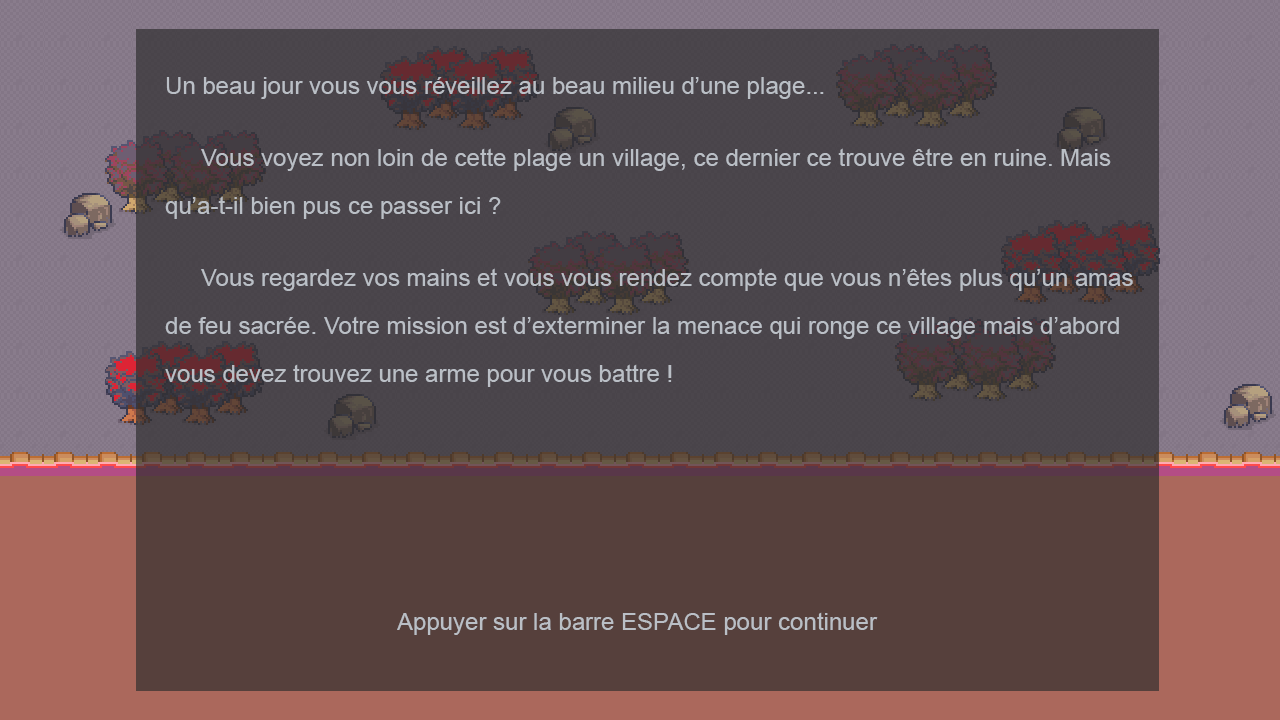
<style>
.page{position:relative;width:1280px;height:720px;background:#56403c}
.page>*{position:absolute;margin:0}
.t1{font:24px/24px "ArialMT";color:#babfc6}
.t2{font:24px/24px "ArialMT";color:#999999}
.t3{font:24px "ArialMT";color:#babfc6}
</style>
<div class="page">
<p class="t1" style="left:165px;top:77px;width:968px;height:310px"><span class="t2"><br> <br> </span>Un beau jour vous vous réveillez au beau milieu d’une plage...<br><br> <br>  Vous voyez non loin de cette plage un village, ce dernier ce trouve être en ruine. Mais<br><br> qu’a-t-il bien pus ce passer ici ?<br><br> <br>  Vous regardez vos mains et vous vous rendez compte que vous n’êtes plus qu’un amas<br><br> de feu sacrée. Votre mission est d’exterminer la menace qui ronge ce village mais d’abord<br><br> vous devez trouvez une arme pour vous battre !</p>
<p class="t3" style="left:397px;top:612px;width:481px;height:23px">Appuyer sur la barre ESPACE pour continuer</p>
</div>
